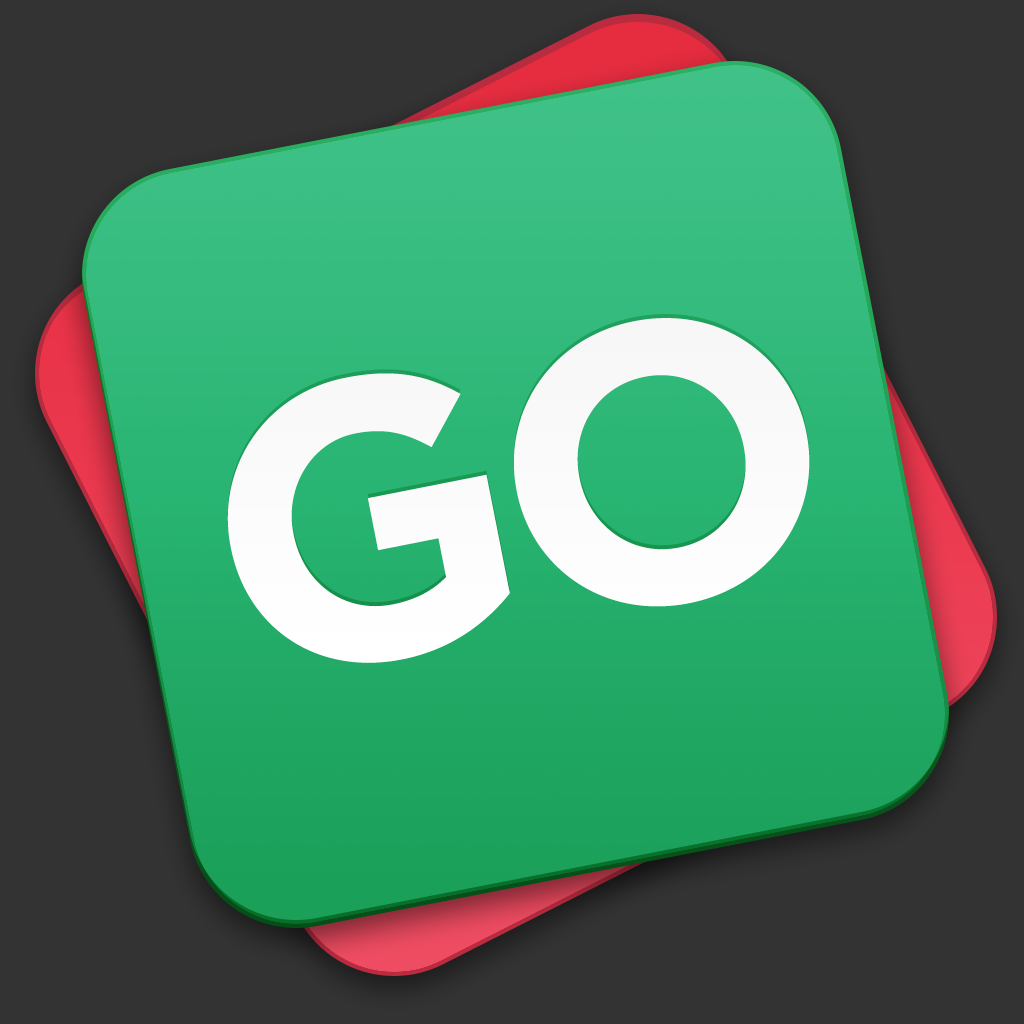
<style>
.page{position:relative;width:1024px;height:1024px;background:#333333}
.page>*{position:absolute;margin:0}
.t1{font:396.5px "Gotham-Bold";letter-spacing:-0.05em;color:#ffffff}
</style>
<div class="page">
<p class="t1" style="left:227px;top:318px;width:583px;height:345px;rotate:-11deg">GO</p>
</div>
